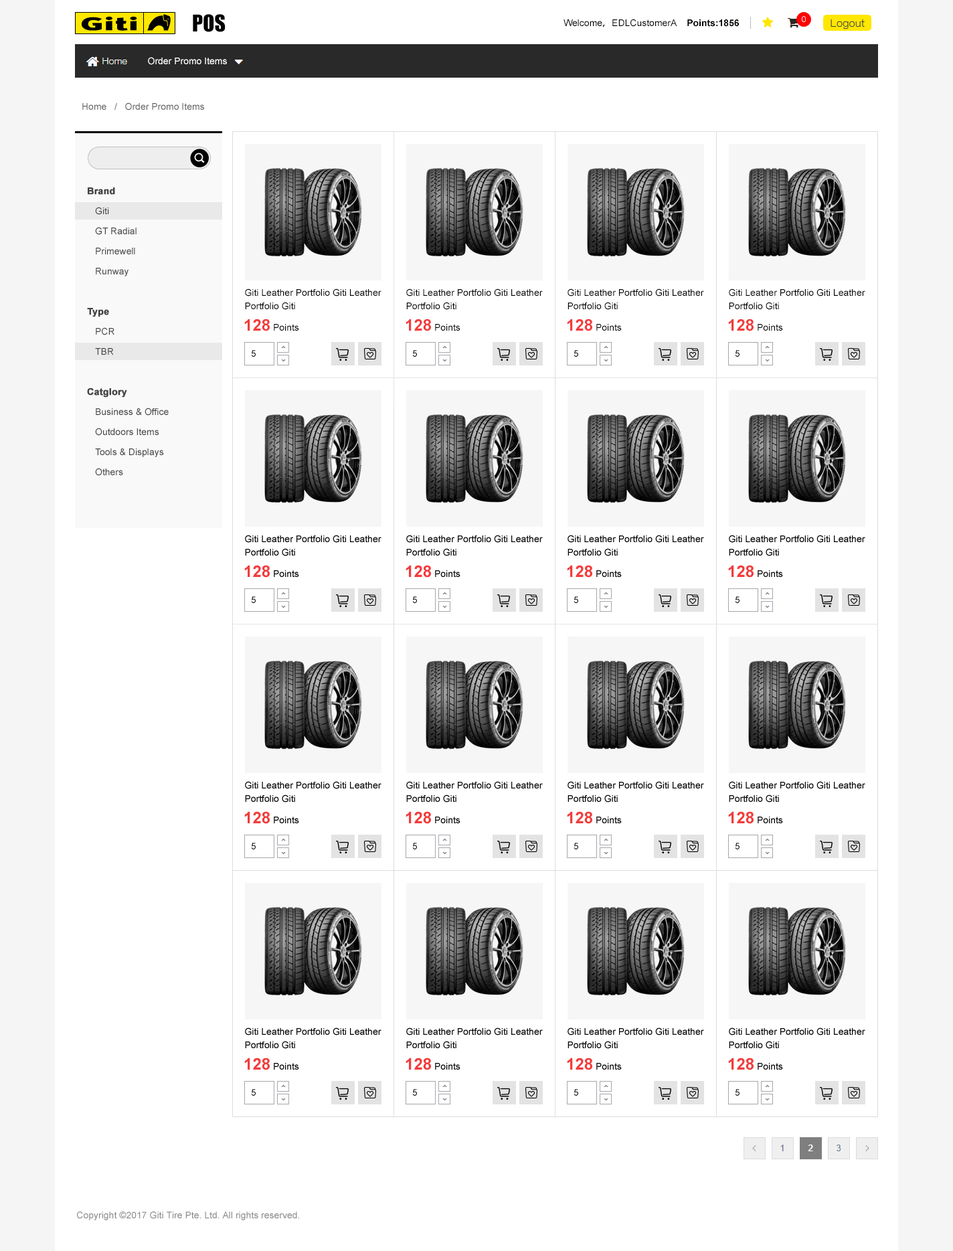
<style>
.page{position:relative;width:953px;height:1251px;background:#ffffff}
.page>*{position:absolute;margin:0}
.t1{font:21.4px "Impact";color:#000000}
.t2{font:9.4px "ArialMT";color:#000000}
.t3{font:9.4px "AdobeHeitiStd-Regular";color:#000000}
.t4{font:9.4px "Arial-BoldMT";color:#000000}
.t5{font:9.4px "ArialMT";color:#ffffff}
.t6{font:9.4px "ArialMT";color:#626262}
.t7{font:9.4px/20.1px "ArialMT";color:#434343}
.t8{font:9.4px/20.1px "Arial-BoldMT";color:#434343;font-weight:bold}
.t9{font:9.4px/13.4px "ArialMT";color:#000000}
.t10{font:16.1px "Arial-BoldMT";color:#f23c3c}
.t11{font:9.4px "ArialMT";color:#898989}
</style>
<div class="page">
<p class="t1" style="left:193px;top:14px;width:33px;height:18px">POS</p>
<p class="t2" style="left:564px;top:19px;width:175px;height:8px">Welcome<span class="t3">，</span>EDLCustomerA    <span class="t4">Points:1856</span></p>
<p class="t5" style="left:148px;top:57px;width:79px;height:8px">Order Promo Items</p>
<p class="t6" style="left:82px;top:102px;width:122px;height:8px">Home   /   Order Promo Items</p>
<p class="t7" style="left:87px;top:187px;width:82px;height:289px"><span class="t8">Brand<br></span>Giti<br>GT Radial<br>Primewell<br>Runway<br><br><span class="t8">Type<br></span>PCR<br>TBR<br><br><span class="t8">Catglory<br></span>Business &amp; Office<br>Outdoors Items<br>Tools &amp; Displays<br>Others</p>
<p class="t9" style="left:245px;top:288px;width:137px;height:22px">Giti Leather Portfolio Giti Leather<br>Portfolio Giti</p>
<p class="t9" style="left:406px;top:288px;width:137px;height:22px">Giti Leather Portfolio Giti Leather<br>Portfolio Giti</p>
<p class="t9" style="left:568px;top:288px;width:136px;height:22px">Giti Leather Portfolio Giti Leather<br>Portfolio Giti</p>
<p class="t9" style="left:729px;top:288px;width:136px;height:22px">Giti Leather Portfolio Giti Leather<br>Portfolio Giti</p>
<p class="t2" style="left:244px;top:319px;width:55px;height:12px"><span class="t10">128</span> Points</p>
<p class="t2" style="left:406px;top:319px;width:55px;height:12px"><span class="t10">128</span> Points</p>
<p class="t2" style="left:567px;top:319px;width:55px;height:12px"><span class="t10">128</span> Points</p>
<p class="t2" style="left:728px;top:319px;width:55px;height:12px"><span class="t10">128</span> Points</p>
<p class="t2" style="left:251px;top:350px;width:5px;height:7px">5</p>
<p class="t2" style="left:412px;top:350px;width:5px;height:7px">5</p>
<p class="t2" style="left:574px;top:350px;width:4px;height:7px">5</p>
<p class="t2" style="left:735px;top:350px;width:5px;height:7px">5</p>
<p class="t11" style="left:77px;top:1212px;width:222px;height:8px">Copyright ©2017 Giti Tire Pte. Ltd. All rights reserved.</p>
</div>
